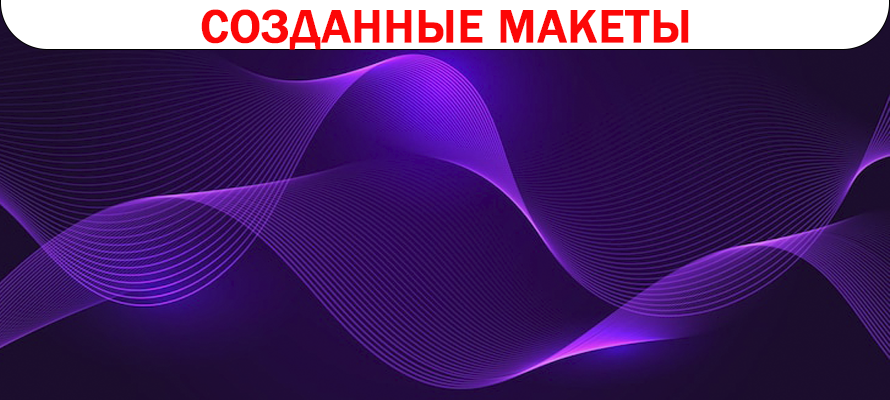
<style>
.page{position:relative;width:890px;height:400px}
.page>*{position:absolute;margin:0}
.t1{font:48px "FranklinGothic-Medium";color:#fc0707;text-transform:uppercase;font-weight:bold}
</style>
<div class="page">
<p class="t1" style="left:201px;top:9px;width:488px;height:41px">Созданные макеты</p>
</div>
